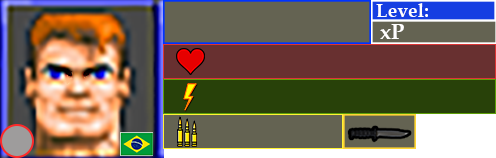
<style>
.page{position:relative;width:496px;height:158px;background:#646352}
.page>*{position:absolute;margin:0}
.t1{font:19.4px "PalatinoLinotype-Bold";color:#fffefe}
.t2{font:22.2px "PalatinoLinotype-Bold";color:#fffefe}
</style>
<div class="page">
<p class="t1" style="left:376px;top:3px;width:52px;height:14px">Level:</p>
<p class="t2" style="left:380px;top:24px;width:24px;height:15px">xP</p>
</div>
